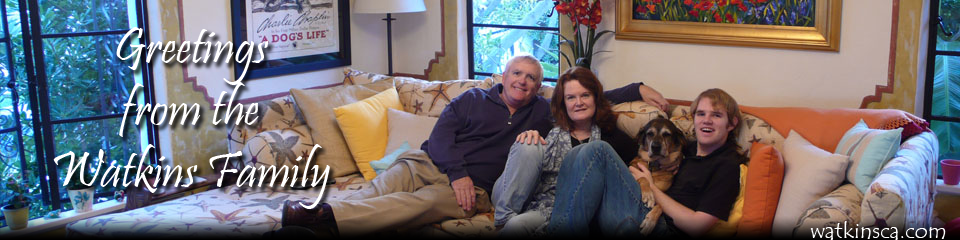
<style>
.page{position:relative;width:960px;height:240px}
.page>*{position:absolute;margin:0}
.t1{font:51.6px "Pristina-Regular";color:#ffffff}
.t2{font:22.4px "TempusSansITC";color:#ffffff}
</style>
<div class="page">
<p class="t1" style="left:53px;top:27px;width:277px;height:182px;text-align:center">Greetings<br>from the<br>Watkins Family</p>
<p class="t2" style="left:810px;top:221px;width:136px;height:19px">watkinsca.com</p>
</div>
